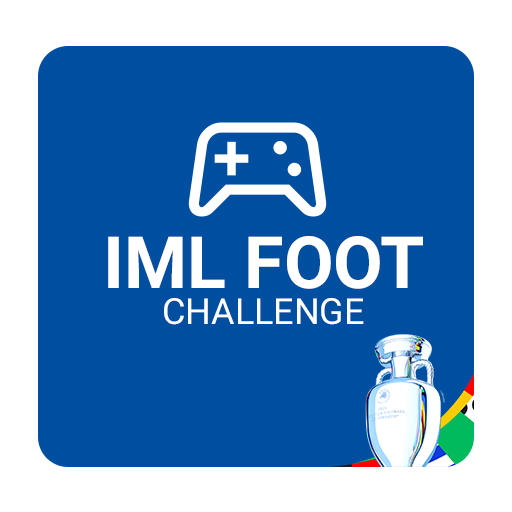
<style>
.page{position:relative;width:512px;height:512px;background:#004ea0}
.page>*{position:absolute;margin:0}
.t1{font:36px/36px "Roboto-Regular";color:#ffffff;text-transform:uppercase}
.t2{font:72px/36px "Roboto-Bold";color:#ffffff;text-transform:uppercase}
</style>
<div class="page">
<p class="t1" style="left:108px;top:236px;width:315px;height:89px;text-align:center"><span class="t2">IML FOOT<br></span>CHALLENGE</p>
</div>
